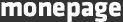
<style>
.page{position:relative;width:123px;height:22px;background:#333333}
.page>*{position:absolute;margin:0}
.t1{font:28px "KlavikaBold-Bold";color:#fcfcfc}
</style>
<div class="page">
<p class="t1" style="left:1px;top:2px;width:120px;height:20px">monepage</p>
</div>
